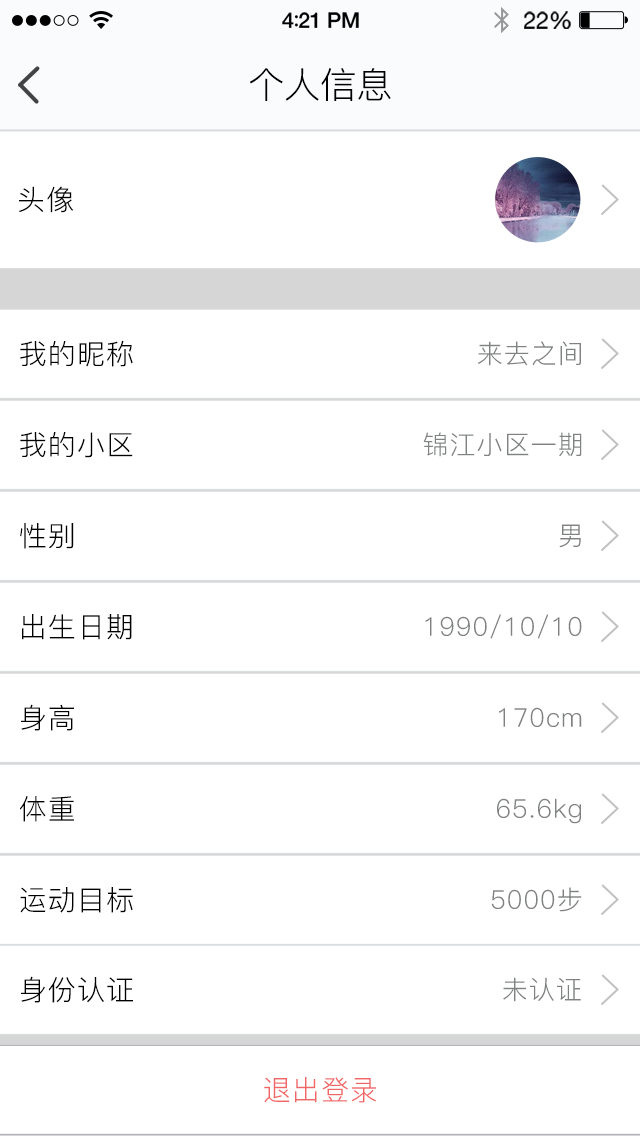
<style>
.page{position:relative;width:640px;height:1136px;background:#ffffff}
.page>*{position:absolute;margin:0}
.t1{font:36px "PingFang-SC-Regular";color:#000000}
.t2{font:28px "PingFang-SC-Regular";letter-spacing:0.04em;color:#000000}
.t3{font:26px "PingFang-SC-Regular";letter-spacing:0.04em;color:#808282}
.t4{font:28px "PingFang-SC-Regular";letter-spacing:0.04em;color:#f16565}
</style>
<div class="page">
<p class="t1" style="left:249px;top:68px;width:142px;height:33px">个人信息</p>
<p class="t2" style="left:18px;top:186px;width:55px;height:27px">头像</p>
<p class="t2" style="left:20px;top:340px;width:113px;height:27px">我的昵称</p>
<p class="t3" style="left:477px;top:341px;width:104px;height:25px">来去之间</p>
<p class="t2" style="left:20px;top:432px;width:113px;height:26px">我的小区</p>
<p class="t3" style="left:423px;top:432px;width:159px;height:25px">锦江小区一期</p>
<p class="t2" style="left:20px;top:523px;width:54px;height:26px">性别</p>
<p class="t3" style="left:559px;top:524px;width:22px;height:24px">男</p>
<p class="t2" style="left:22px;top:614px;width:110px;height:26px">出生日期</p>
<p class="t3" style="left:425px;top:614px;width:157px;height:25px">1990/10/10</p>
<p class="t2" style="left:21px;top:704px;width:53px;height:27px">身高</p>
<p class="t3" style="left:499px;top:707px;width:83px;height:20px">170cm</p>
<p class="t2" style="left:20px;top:796px;width:54px;height:26px">体重</p>
<p class="t3" style="left:497px;top:798px;width:84px;height:26px">65.6kg</p>
<p class="t2" style="left:20px;top:887px;width:113px;height:26px">运动目标</p>
<p class="t3" style="left:491px;top:887px;width:91px;height:25px">5000步</p>
<p class="t2" style="left:21px;top:976px;width:112px;height:27px">身份认证</p>
<p class="t3" style="left:503px;top:977px;width:78px;height:25px">未认证</p>
<p class="t4" style="left:264px;top:1077px;width:112px;height:26px">退出登录</p>
</div>
